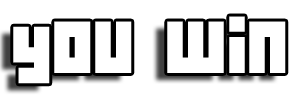
<style>
.page{position:relative;width:300px;height:100px;background:#ffffff}
.page>*{position:absolute;margin:0}
.t1{font:72px "04b19";color:#ffffff}
</style>
<div class="page">
<p class="t1" style="left:13px;top:16px;width:273px;height:68px">you win</p>
</div>
